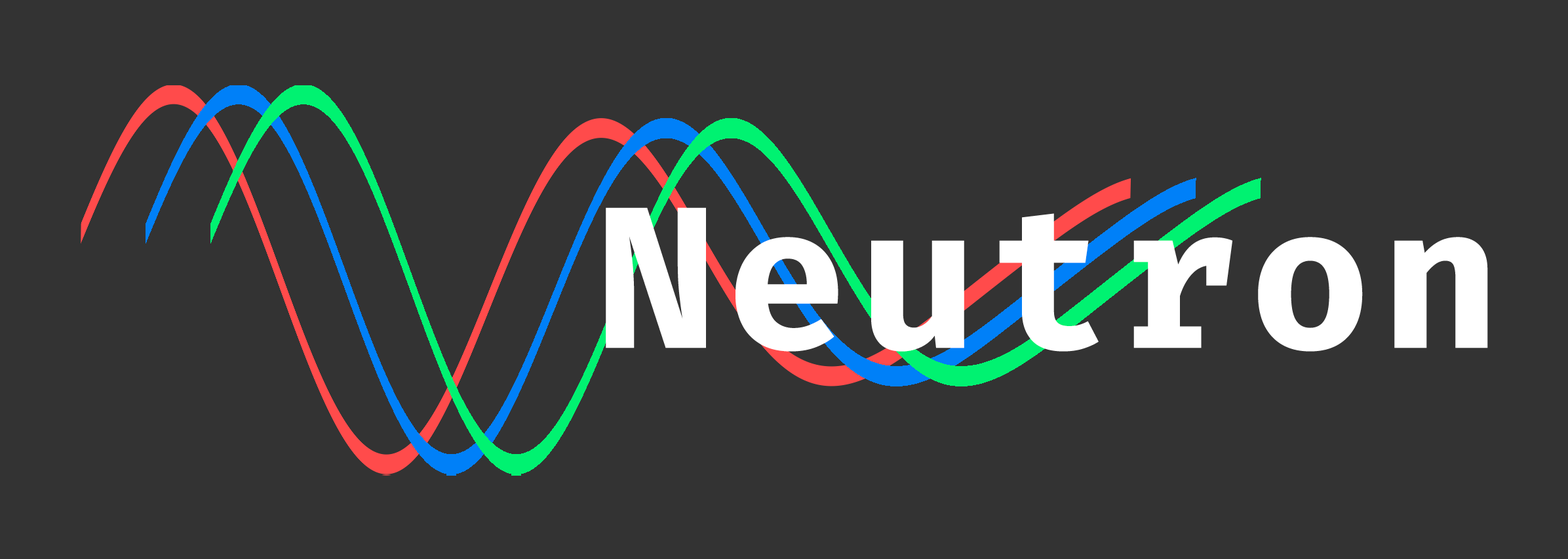
<style>
.page{position:relative;width:1568px;height:559px;background:#333333}
.page>*{position:absolute;margin:0}
.t1{font:196.7px "FiraCode-Bold";letter-spacing:0.05em;color:#ffffff}
</style>
<div class="page">
<p class="t1" style="left:606px;top:207px;width:882px;height:144px">Neutron</p>
</div>
